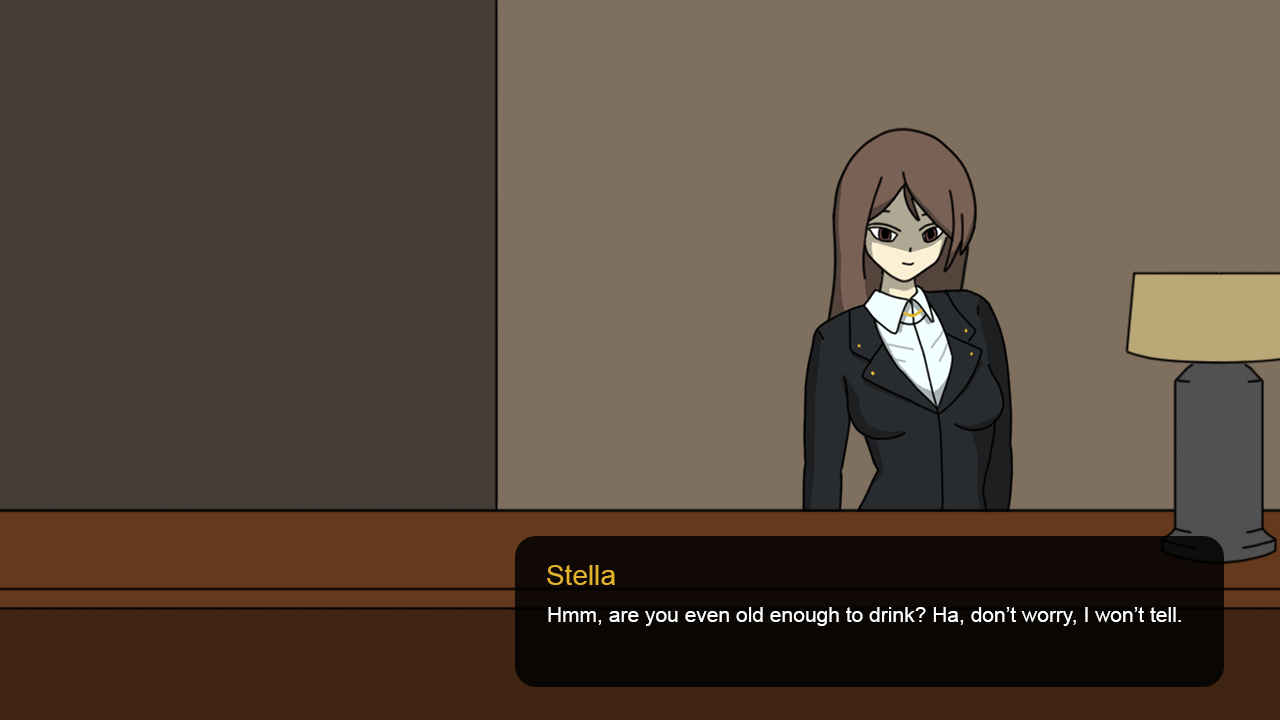
<style>
.page{position:relative;width:1280px;height:720px;background:#7f6f5f}
.page>*{position:absolute;margin:0}
.t1{font:28px "ArialMT";color:#e2b32d}
.t2{font:21px "ArialMT";color:#ffffff}
</style>
<div class="page">
<p class="t1" style="left:547px;top:565px;width:68px;height:20px">Stella</p>
<p class="t2" style="left:548px;top:607px;width:633px;height:19px">Hmm, are you even old enough to drink? Ha, don’t worry, I won’t tell.</p>
</div>
